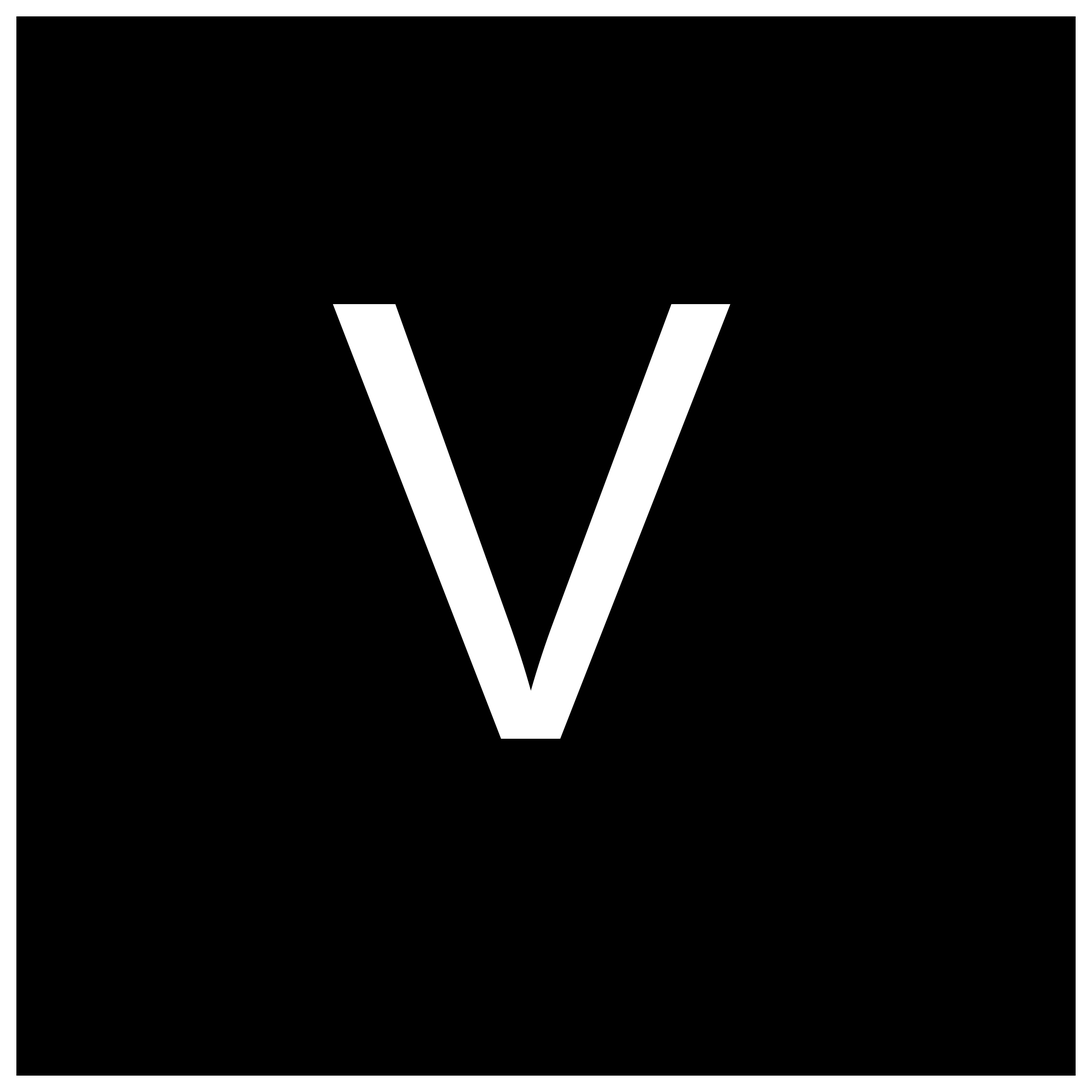
<style>
.page{position:relative;width:1092px;height:1092px;background:#000000}
.page>*{position:absolute;margin:0}
.t1{font:606.7px "ArialMT";color:#ffffff}
</style>
<div class="page">
<p class="t1" style="left:333px;top:304px;width:398px;height:435px">V</p>
</div>
